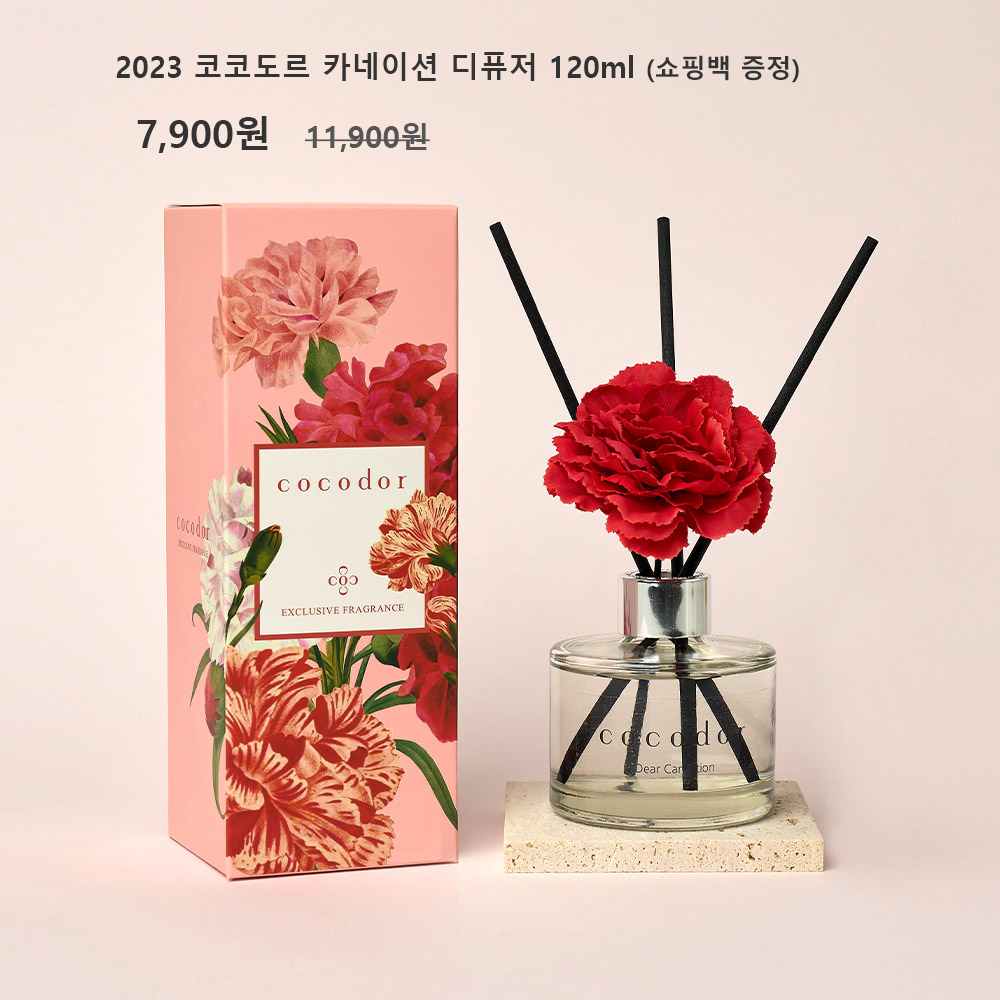
<style>
.page{position:relative;width:1000px;height:1000px}
.page>*{position:absolute;margin:0}
.t1{font:30px "MalgunGothicBold";color:#333333}
.t2{font:26px "MalgunGothicBold";color:#333333}
.t3{font:38px "MalgunGothicBold";color:#333333}
.t4{font:30px "MalgunGothicBold";color:#555555}
</style>
<div class="page">
<p class="t1" style="left:116px;top:52px;width:683px;height:31px">2023 코코도르 카네이션 디퓨저 120ml <span class="t2">(쇼핑백 증정)</span></p>
<p class="t3" style="left:137px;top:116px;width:131px;height:37px">7,900원</p>
<p class="t4" style="left:305px;top:123px;width:125px;height:29px">11,900원</p>
</div>
